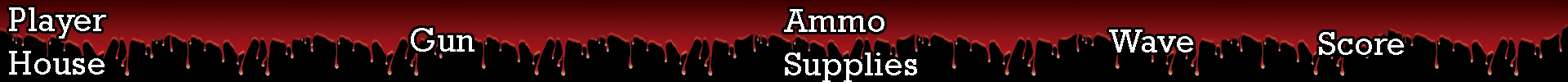
<style>
.page{position:relative;width:1568px;height:82px;background:#000000}
.page>*{position:absolute;margin:0}
.t1{font:34px "Rockwell";color:#ffffff}
.t2{font:33.8px "Rockwell";color:#ffffff}
</style>
<div class="page">
<p class="t1" style="left:9px;top:7px;width:97px;height:31px">Player</p>
<p class="t2" style="left:784px;top:9px;width:100px;height:23px">Ammo</p>
<p class="t1" style="left:411px;top:28px;width:63px;height:23px">Gun</p>
<p class="t2" style="left:1109px;top:29px;width:84px;height:23px">Wave</p>
<p class="t2" style="left:1319px;top:32px;width:85px;height:23px">Score</p>
<p class="t1" style="left:9px;top:51px;width:96px;height:23px">House</p>
<p class="t2" style="left:785px;top:52px;width:132px;height:30px">Supplies</p>
</div>
